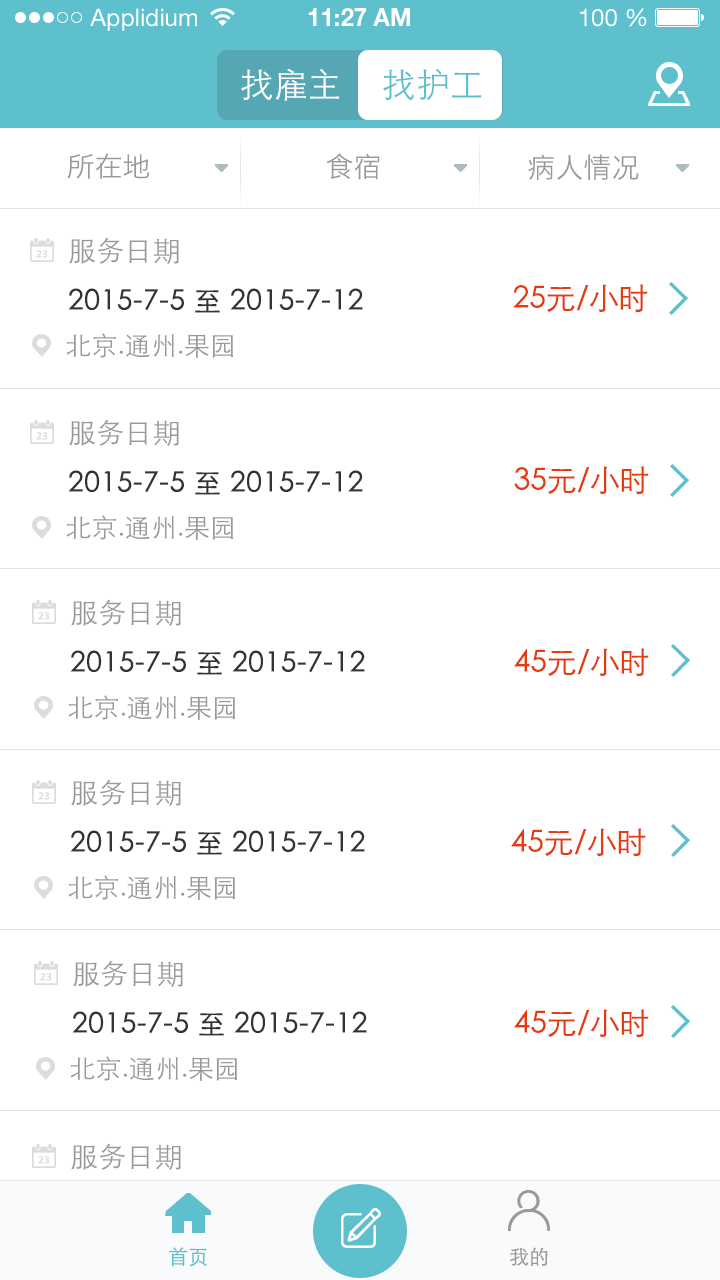
<style>
.page{position:relative;width:720px;height:1280px;background:#ffffff}
.page>*{position:absolute;margin:0}
.t1{font:34px "STHeitiSC-Light";color:#ffffff}
.t2{font:34px "STHeitiSC-Light";color:#5fc0cd}
.t3{font:28px "HiraginoSansGB-W3";color:#999999}
.t4{font:28px "STHeitiSC-Light";color:#999999}
.t5{font:24px "HiraginoSansGB-W3";color:#5d5d5d}
.t6{font:28px "STHeitiSC-Light";color:#333333;font-weight:bold}
.t7{font:30px "STHeitiSC-Light";color:#e63b0e}
.t8{font:26px "STHeitiSC-Light";color:#999999}
.t9{font:20px "STHeitiSC-Light";color:#5fc0cd}
.t10{font:20px "STHeitiSC-Light";color:#999999}
</style>
<div class="page">
<p class="t1" style="left:241px;top:68px;width:98px;height:33px">找雇主</p>
<p class="t2" style="left:383px;top:68px;width:99px;height:33px">找护工</p>
<p class="t3" style="left:67px;top:153px;width:82px;height:26px">所在地</p>
<p class="t3" style="left:326px;top:153px;width:54px;height:27px">食宿</p>
<p class="t3" style="left:528px;top:154px;width:111px;height:26px">病人情况</p>
<p class="t4" style="left:69px;top:237px;width:110px;height:27px"><span class="t5"><br></span>服务日期</p>
<p class="t6" style="left:68px;top:288px;width:295px;height:25px">2015-7-5 至 2015-7-12</p>
<p class="t7" style="left:513px;top:284px;width:135px;height:29px">25元/小时</p>
<p class="t8" style="left:66px;top:333px;width:167px;height:25px">北京.通州.果园</p>
<p class="t4" style="left:69px;top:419px;width:110px;height:27px"><span class="t5"><br></span>服务日期</p>
<p class="t6" style="left:68px;top:470px;width:295px;height:25px">2015-7-5 至 2015-7-12</p>
<p class="t7" style="left:514px;top:466px;width:135px;height:29px">35元/小时</p>
<p class="t8" style="left:66px;top:515px;width:167px;height:25px">北京.通州.果园</p>
<p class="t4" style="left:71px;top:599px;width:110px;height:27px"><span class="t5"><br></span>服务日期</p>
<p class="t6" style="left:70px;top:650px;width:295px;height:25px">2015-7-5 至 2015-7-12</p>
<p class="t7" style="left:514px;top:648px;width:135px;height:29px">45元/小时</p>
<p class="t8" style="left:68px;top:695px;width:167px;height:25px">北京.通州.果园</p>
<p class="t4" style="left:71px;top:779px;width:110px;height:27px"><span class="t5"><br></span>服务日期</p>
<p class="t6" style="left:70px;top:830px;width:295px;height:25px">2015-7-5 至 2015-7-12</p>
<p class="t7" style="left:511px;top:828px;width:135px;height:29px">45元/小时</p>
<p class="t8" style="left:68px;top:875px;width:167px;height:25px">北京.通州.果园</p>
<p class="t4" style="left:73px;top:960px;width:110px;height:27px"><span class="t5"><br></span>服务日期</p>
<p class="t6" style="left:72px;top:1011px;width:295px;height:25px">2015-7-5 至 2015-7-12</p>
<p class="t7" style="left:514px;top:1009px;width:135px;height:29px">45元/小时</p>
<p class="t8" style="left:70px;top:1056px;width:167px;height:25px">北京.通州.果园</p>
<p class="t4" style="left:71px;top:1143px;width:110px;height:27px"><span class="t5"><br></span>服务日期</p>
<p class="t9" style="left:169px;top:1247px;width:38px;height:20px">首页</p>
<p class="t10" style="left:510px;top:1247px;width:38px;height:19px">我的</p>
</div>
